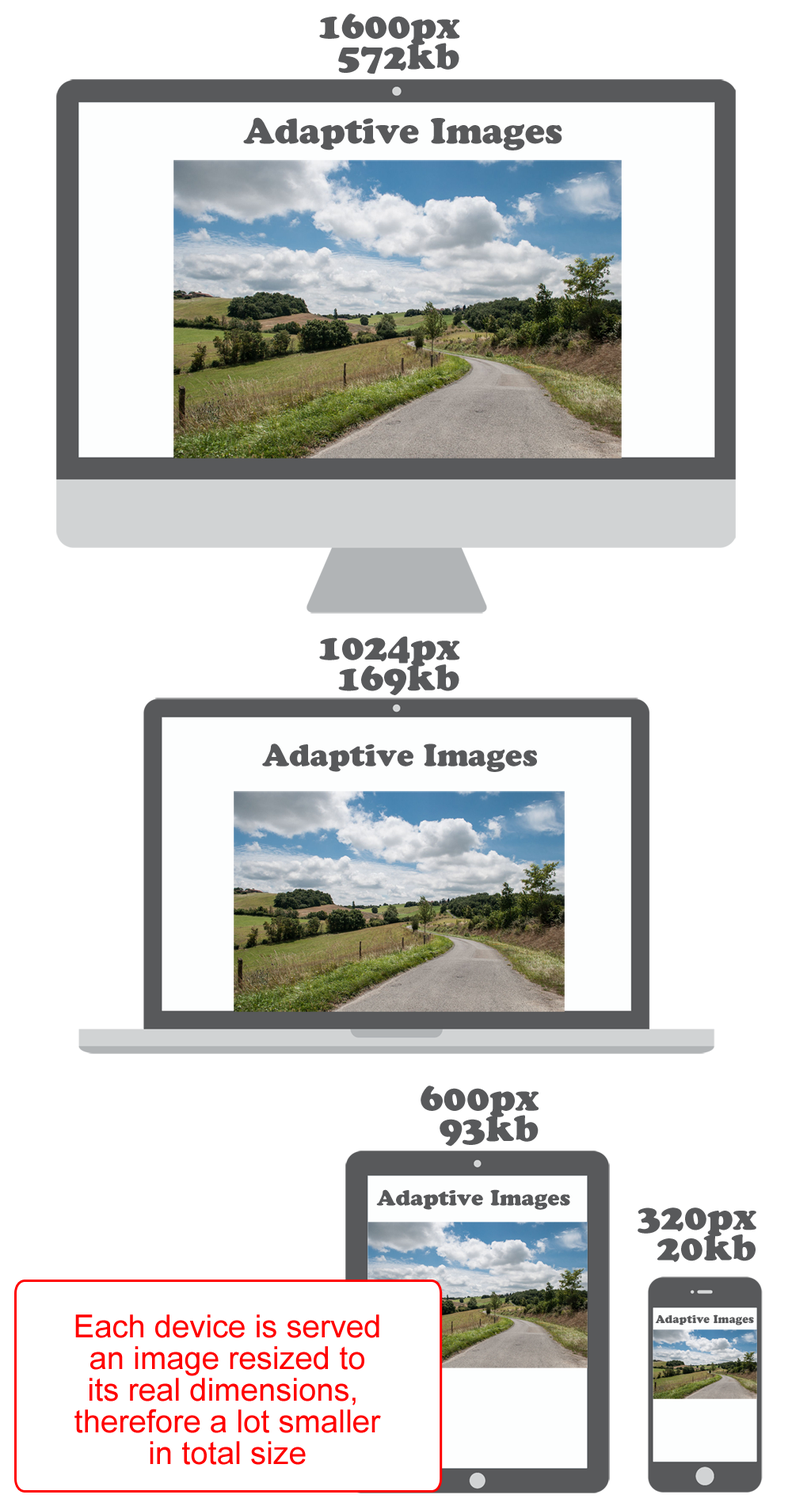
<style>
.page{position:relative;width:792px;height:1506px;background:#ffffff}
.page>*{position:absolute;margin:0}
.t1{font:36.8px/30.7px "CooperBlackStd";color:#58595b}
.t2{font:35.6px "CooperBlackStd";color:#58595b}
.t3{font:30.8px "CooperBlackStd";color:#58595b}
.t4{font:21.6px "CooperBlackStd";color:#58595b}
.t5{font:31.7px/31.7px "ArialMT";color:#ff0000}
.t6{font:11px "CooperBlackStd";color:#58595b}
</style>
<div class="page">
<p class="t1" style="left:319px;top:13px;width:141px;height:61px;text-align:right">1600px<br>572kb</p>
<p class="t2" style="left:243px;top:117px;width:319px;height:33px">Adaptive Images</p>
<p class="t1" style="left:319px;top:636px;width:141px;height:59px;text-align:right">1024px<br>169kb</p>
<p class="t3" style="left:262px;top:743px;width:275px;height:29px">Adaptive Images</p>
<p class="t1" style="left:420px;top:1086px;width:118px;height:61px;text-align:right">600px<br>93kb</p>
<p class="t4" style="left:376px;top:1189px;width:194px;height:21px">Adaptive Images</p>
<p class="t1" style="left:637px;top:1207px;width:119px;height:55px;text-align:right">320px<br>20kb</p>
<p class="t5" style="left:74px;top:1314px;width:307px;height:151px;text-align:center">Each device is served<br>an image resized to<br>its real dimensions, <br>therefore a lot smaller<br>in total size</p>
<p class="t6" style="left:655px;top:1314px;width:99px;height:11px">Adaptive Images</p>
</div>
